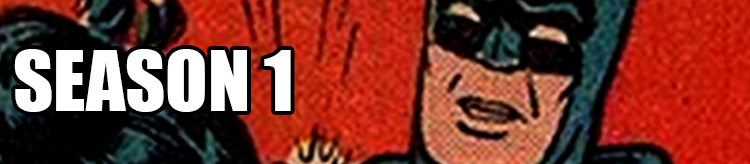
<style>
.page{position:relative;width:750px;height:164px}
.page>*{position:absolute;margin:0}
.t1{font:77.5px "Impact";color:#ffffff}
</style>
<div class="page">
<p class="t1" style="left:14px;top:49px;width:277px;height:63px">SEASON 1</p>
</div>
